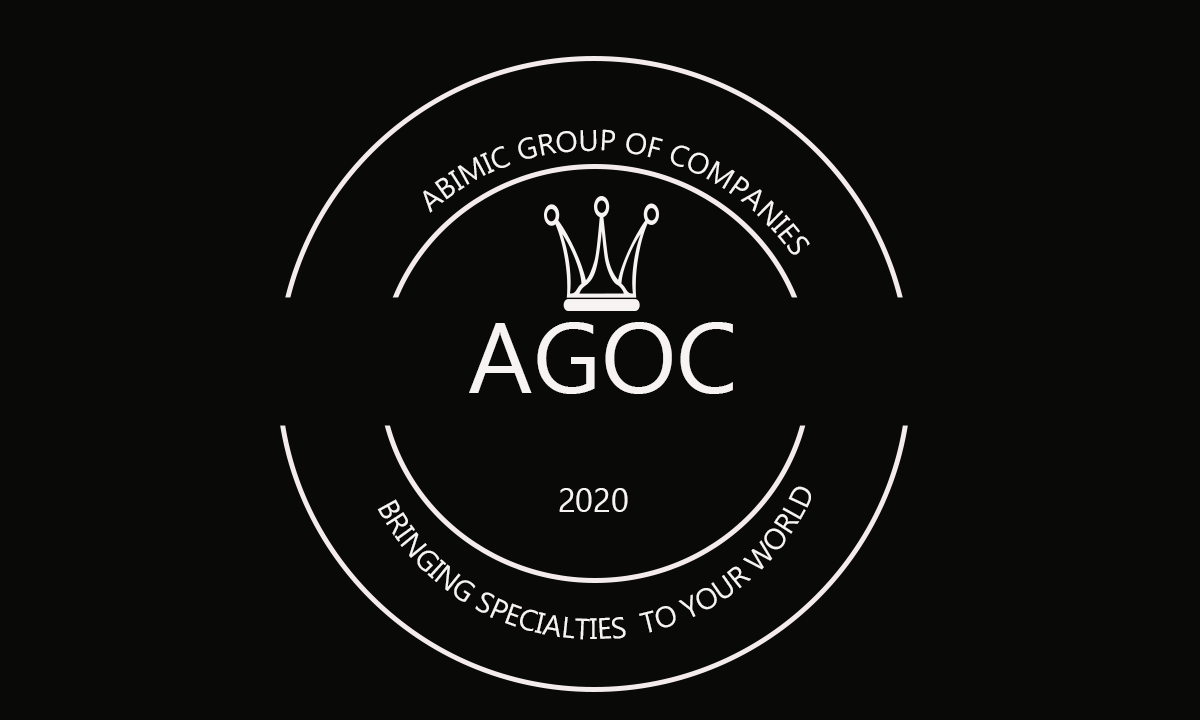
<style>
.page{position:relative;width:1200px;height:720px;background:#090908}
.page>*{position:absolute;margin:0}
.t1{font:29.4px "Gadugi";color:#f7f3f3}
.t2{font:100px "Gadugi";color:#f7f3f3}
.t3{font:33.3px "Gadugi";color:#f7f3f3}
</style>
<div class="page">
<p class="t1" style="left:423px;top:129px;width:387px;height:126px;rotate:-3deg">ABIMIC GROUP OF COMPANIES</p>
<p class="t2" style="left:469px;top:322px;width:264px;height:72px">AGOC</p>
<p class="t1" style="left:377px;top:486px;width:434px;height:154px;rotate:-3deg">BRINGING SPECIALTIES  TO YOUR WORLD</p>
<p class="t3" style="left:559px;top:488px;width:69px;height:24px">2020</p>
</div>
